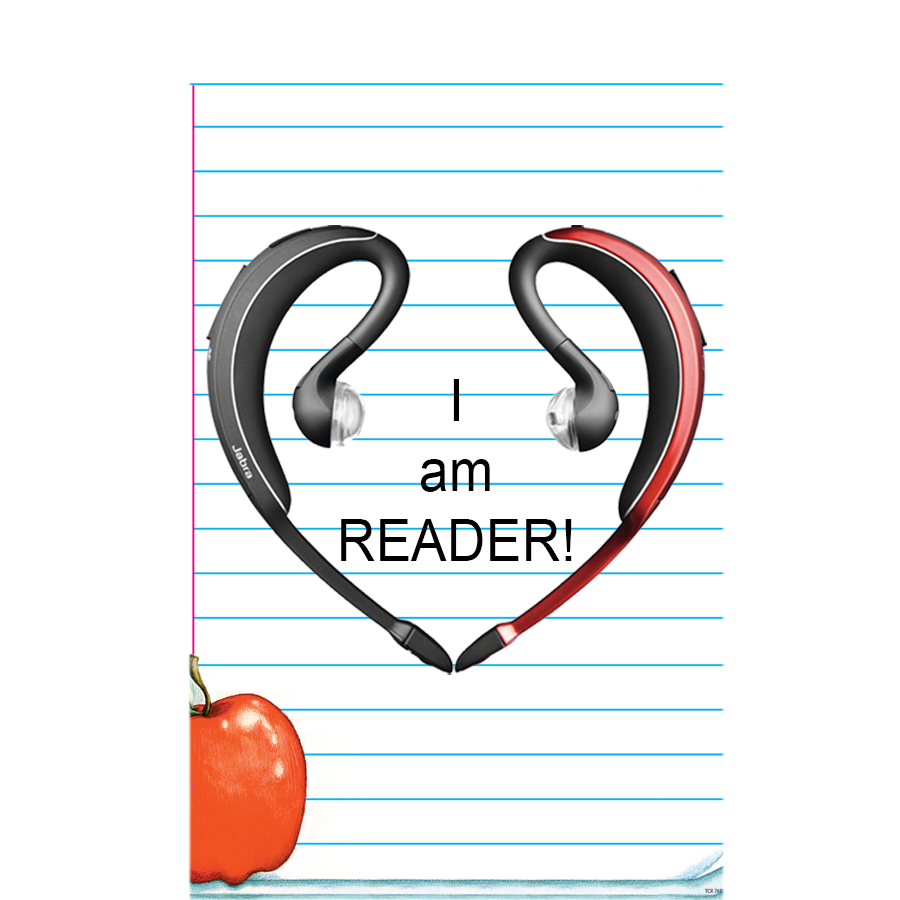
<style>
.page{position:relative;width:900px;height:900px;background:#ffffff}
.page>*{position:absolute;margin:0}
.t1{font:58.4px "ArialMT";letter-spacing:0.015em;color:#000000;scale:0.9 1}
</style>
<div class="page">
<p class="t1" style="left:341px;top:379px;width:231px;height:182px;text-align:center">I<br>am<br>READER!</p>
</div>
